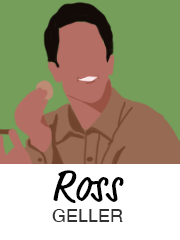
<style>
.page{position:relative;width:180px;height:240px;background:#749e5a}
.page>*{position:absolute;margin:0}
.t1{font:48px "MarketPro";color:#000000}
.t2{font:18px "Helvetica";color:#313131;text-transform:uppercase}
</style>
<div class="page">
<p class="t1" style="left:53px;top:170px;width:71px;height:33px">Ross</p>
<p class="t2" style="left:52px;top:209px;width:71px;height:13px">Geller</p>
</div>
